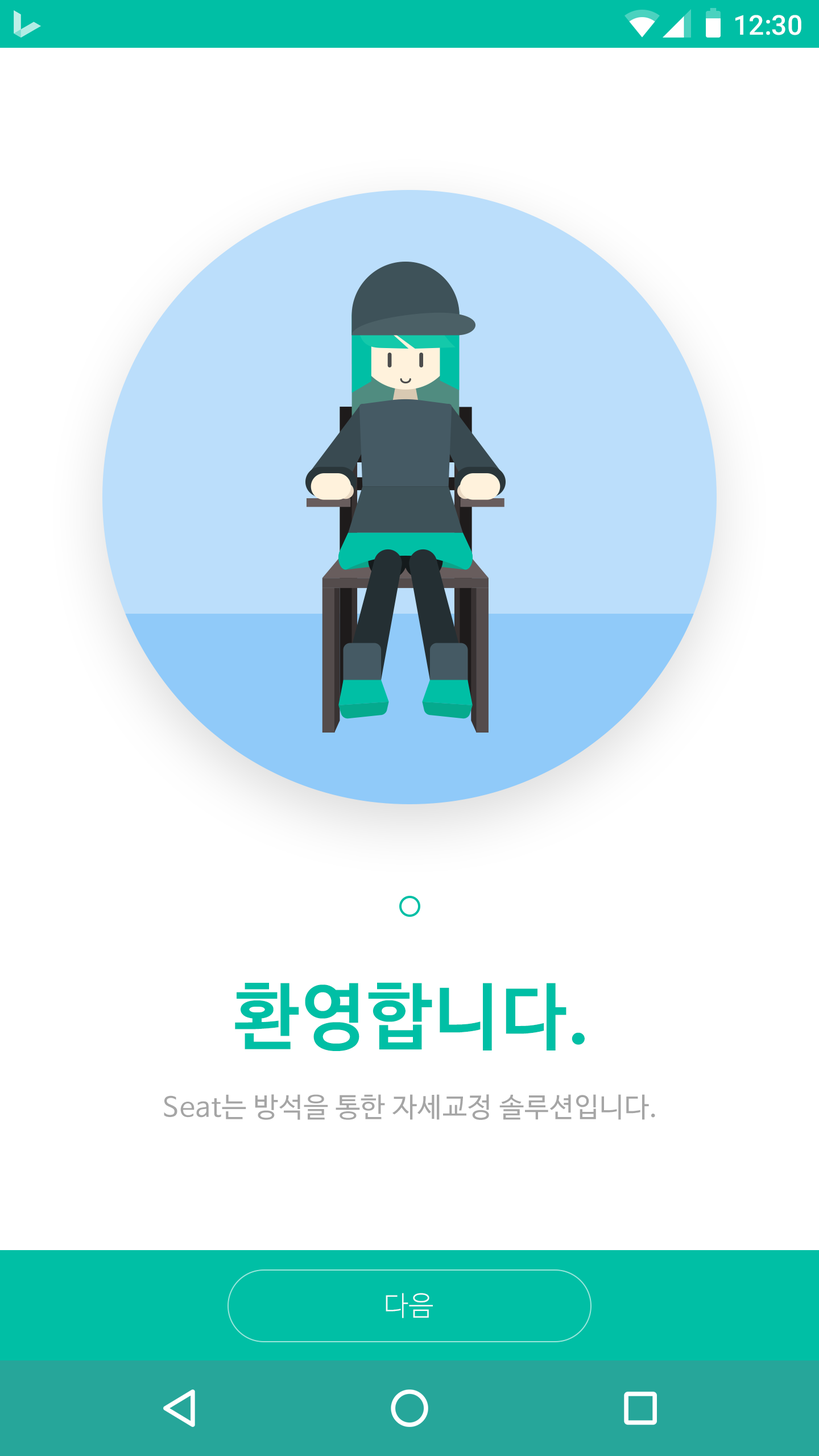
<style>
.page{position:relative;width:819px;height:1456px;background:#ffffff}
.page>*{position:absolute;margin:0}
.t1{font:27.3px "Roboto-Medium";color:#ffffff}
.t2{font:72.8px "NanumBarunGothicBold";letter-spacing:0.025em;color:#00bfa5}
.t3{font:27.3px "NanumBarunGothic";letter-spacing:0.025em;color:#a5a5a5}
.t4{font:27.3px "NanumBarunGothicLight";letter-spacing:0.025em;color:#fafafa}
</style>
<div class="page">
<p class="t1" style="left:735px;top:15px;width:66px;height:20px">12:30</p>
<p class="t2" style="left:235px;top:982px;width:350px;height:69px">환영합니다.</p>
<p class="t3" style="left:164px;top:1094px;width:491px;height:26px">Seat는 방석을 통한 자세교정 솔루션입니다.</p>
<p class="t4" style="left:386px;top:1293px;width:47px;height:25px">다음</p>
</div>
